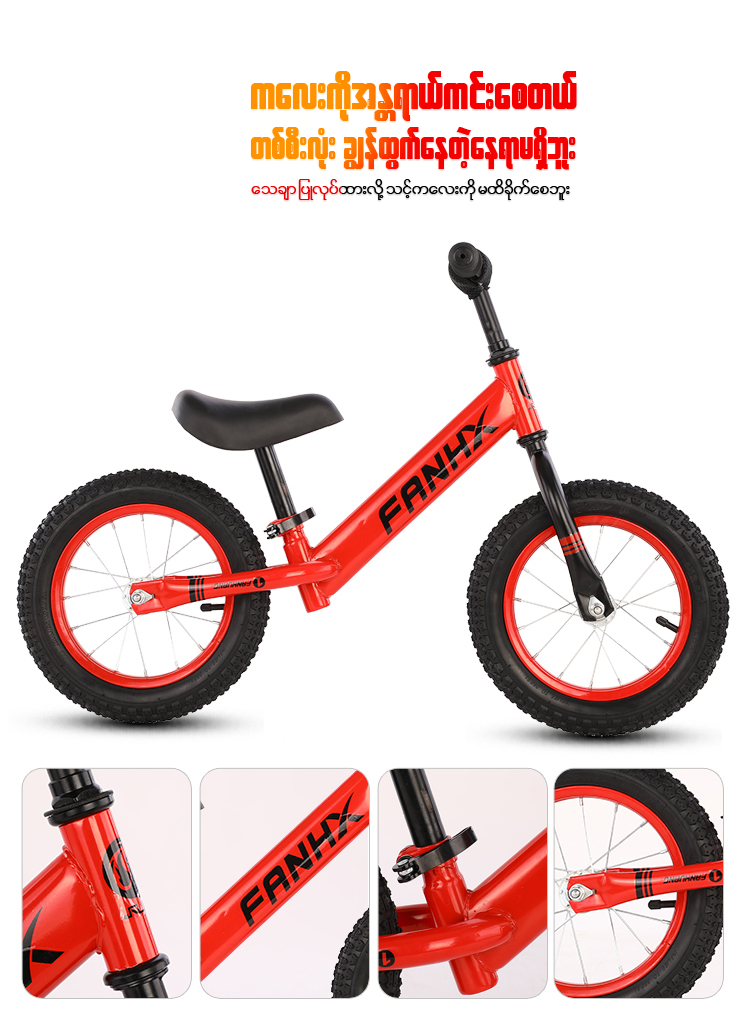
<style>
.page{position:relative;width:750px;height:1013px;background:#ffffff}
.page>*{position:absolute;margin:0}
.t1{font:50.1px "W30ArtHouse"}
.t2{font:42.4px "W30ArtHouse"}
.t3{font:23.2px "W01ArtHouseWin";color:#000000}
</style>
<div class="page">
<p class="t1" style="left:251px;top:71px;width:326px;height:50px">uav;udktEÅ&amp;m,fuif;apw,f</p>
<p class="t2" style="left:251px;top:127px;width:325px;height:43px">wpfpD;vHk; cRefxGufaewJhae&amp;mr&amp;Sdbl;</p>
<p class="t3" style="left:251px;top:179px;width:319px;height:21px">aocsm jyKvkyfxm;vdkY oifhuav;udk rxdcdkufapbl;</p>
</div>
